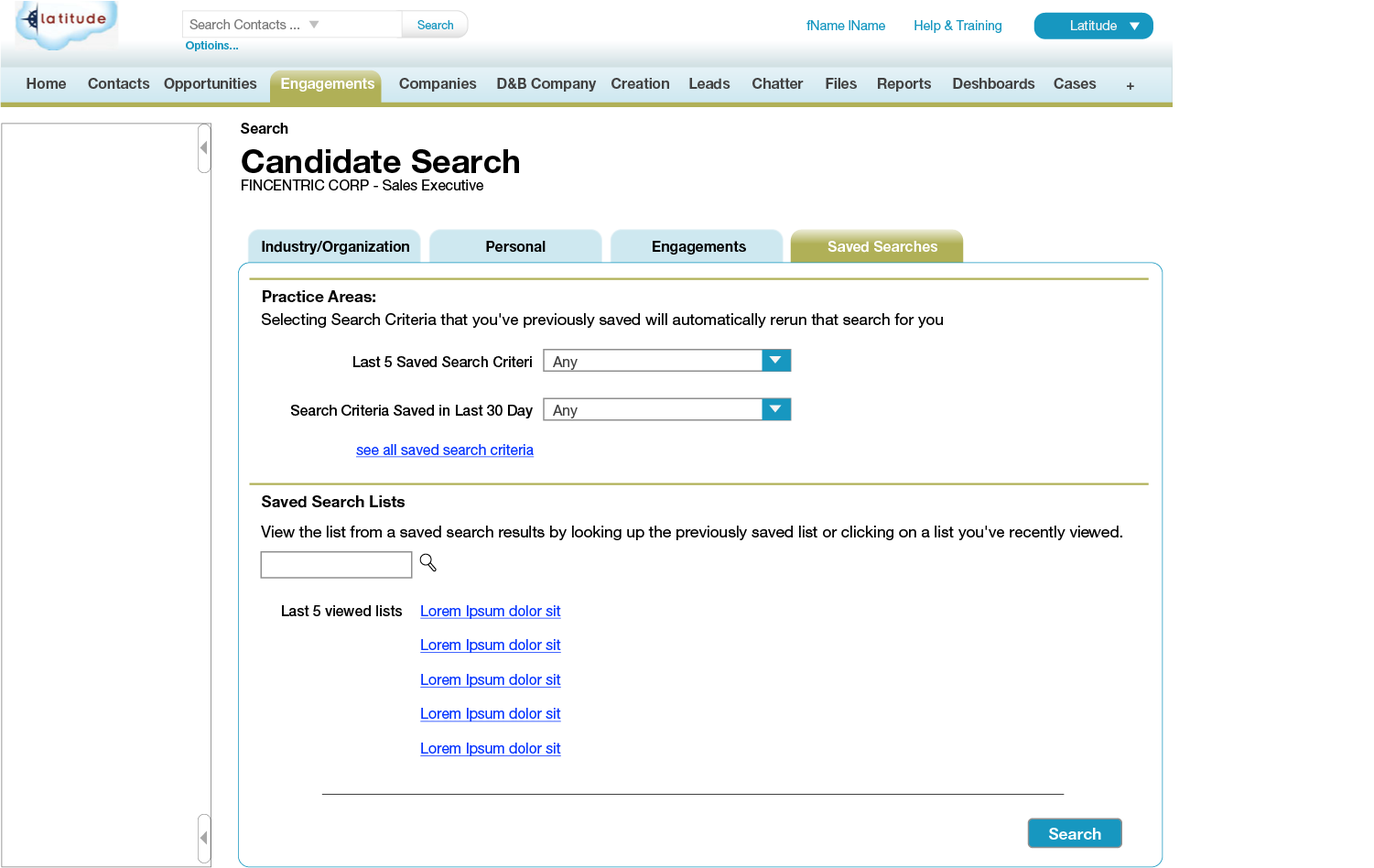
<style>
.page{position:relative;width:1374px;height:868px;background:#ffffff}
.page>*{position:absolute;margin:0}
.t1{font:12.9px "HelveticaNeue-Roman";color:#797979}
.t2{font:11.6px "HelveticaNeue-Roman";color:#1797c0}
.t3{font:12.9px "HelveticaNeue-Roman";color:#1797c0}
.t4{font:12.9px "HelveticaNeue-Roman";color:#f5f5f5}
.t5{font:11px "HelveticaNeue-Bold";color:#1797c0}
.t6{font:14.3px "HelveticaNeue-Bold";color:#424242}
.t7{font:14.3px "HelveticaNeue-Bold";color:#ffffff}
.t8{font:14.3px "HelveticaNeue-Roman";color:#000000}
.t9{font:14.3px "HelveticaNeue-Bold";color:#000000}
.t10{font:33px "HelveticaNeueLTStd-Bd";color:#000000}
.t11{font:15.8px "HelveticaNeue-Bold";color:#000000}
.t12{font:15.8px "HelveticaNeue-Roman";color:#000000}
.t13{font:14.3px "HelveticaNeue-Medium";color:#000000}
.t14{font:14.3px "HelveticaNeue-Roman";color:#424242}
.t15{font:14.3px "HelveticaNeue-Roman";color:#0433ff;text-decoration:underline}
.t16{font:15.8px "HelveticaNeue-Bold";color:#ffffff}
</style>
<div class="page">
<p class="t1" style="left:189px;top:19px;width:110px;height:10px">Search Contacts ...</p>
<p class="t2" style="left:417px;top:20px;width:36px;height:9px">Search</p>
<p class="t3" style="left:806px;top:20px;width:195px;height:13px">fName lName        Help &amp; Training</p>
<p class="t4" style="left:1071px;top:20px;width:46px;height:10px">Latitude</p>
<p class="t5" style="left:186px;top:41px;width:52px;height:10px">Optioins...</p>
<p class="t6" style="left:27px;top:78px;width:39px;height:11px">Home</p>
<p class="t6" style="left:88px;top:78px;width:62px;height:11px">Contacts</p>
<p class="t6" style="left:164px;top:78px;width:93px;height:14px">Opportunities</p>
<p class="t7" style="left:281px;top:78px;width:93px;height:14px">Engagements</p>
<p class="t6" style="left:399px;top:78px;width:78px;height:14px">Companies</p>
<p class="t6" style="left:497px;top:78px;width:100px;height:14px">D&amp;B Company</p>
<p class="t6" style="left:612px;top:78px;width:57px;height:11px">Creation</p>
<p class="t6" style="left:689px;top:78px;width:42px;height:12px">Leads</p>
<p class="t6" style="left:752px;top:78px;width:52px;height:11px">Chatter</p>
<p class="t6" style="left:826px;top:78px;width:31px;height:11px">Files</p>
<p class="t6" style="left:878px;top:78px;width:53px;height:14px">Reports</p>
<p class="t6" style="left:953px;top:78px;width:82px;height:12px">Deshboards</p>
<p class="t6" style="left:1054px;top:78px;width:43px;height:11px">Cases</p>
<p class="t6" style="left:1127px;top:82px;width:7px;height:8px">+</p>
<p class="t8" style="left:241px;top:123px;width:278px;height:67px"><span class="t9">Search<br></span><span class="t10">Candidate Search<br></span>FINCENTRIC CORP - Sales Executive</p>
<p class="t9" style="left:262px;top:241px;width:147px;height:13px">Industry/Organization</p>
<p class="t9" style="left:486px;top:241px;width:60px;height:11px">Personal</p>
<p class="t9" style="left:653px;top:241px;width:93px;height:13px">Engagements</p>
<p class="t7" style="left:828px;top:241px;width:109px;height:12px">Saved Searches</p>
<p class="t11" style="left:263px;top:290px;width:112px;height:12px">Practice Areas:</p>
<p class="t12" style="left:262px;top:313px;width:681px;height:15px">Selecting Search Criteria that you've previously saved will automatically rerun that search for you</p>
<p class="t13" style="left:353px;top:356px;width:179px;height:11px">Last 5 Saved Search Criteri</p>
<p class="t14" style="left:553px;top:356px;width:25px;height:14px">Any</p>
<p class="t13" style="left:291px;top:405px;width:242px;height:13px">Search Criteria Saved in Last 30 Day</p>
<p class="t14" style="left:553px;top:405px;width:25px;height:13px">Any</p>
<p class="t15" style="left:356px;top:444px;width:179px;height:14px">see all saved search criteria</p>
<p class="t11" style="left:262px;top:495px;width:143px;height:13px">Saved Search Lists</p>
<p class="t12" style="left:261px;top:525px;width:861px;height:15px">View the list from a saved search results by looking up the previously saved list or clicking on a list you've recently viewed.</p>
<p class="t13" style="left:282px;top:605px;width:120px;height:11px">Last 5 viewed lists</p>
<p class="t15" style="left:420px;top:605px;width:141px;height:151px">Lorem Ipsum dolor sit<br><br>Lorem Ipsum dolor sit<br><br>Lorem Ipsum dolor sit<br><br>Lorem Ipsum dolor sit<br><br>Lorem Ipsum dolor sit</p>
<p class="t16" style="left:1049px;top:828px;width:52px;height:11px">Search</p>
</div>
